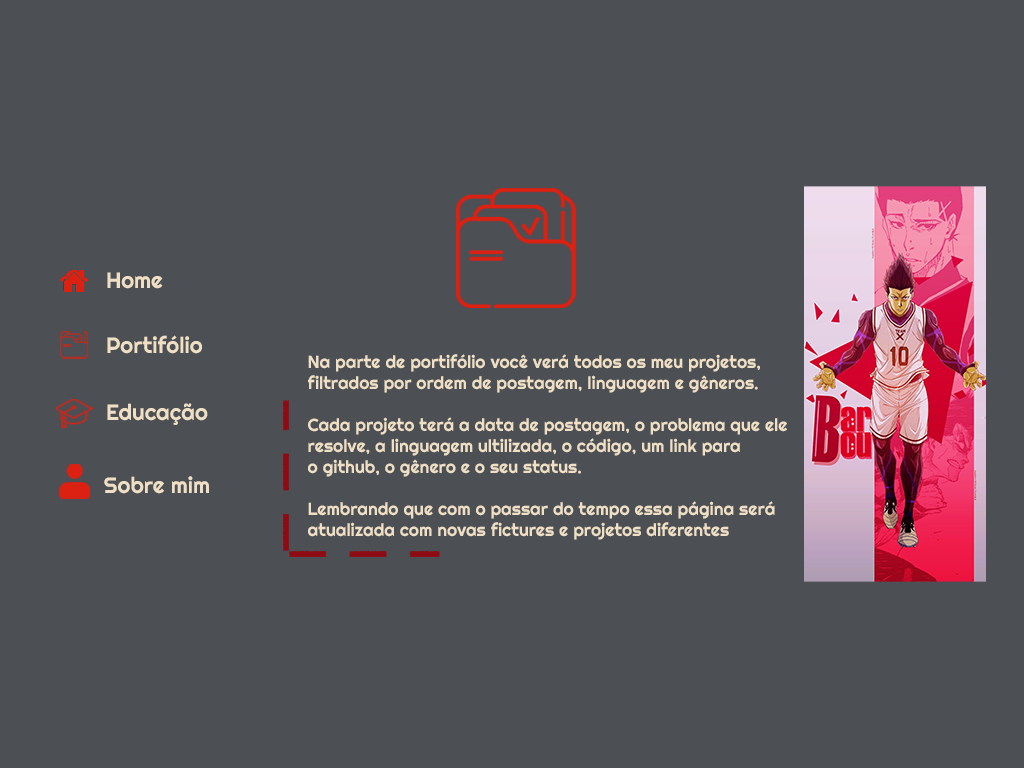
<style>
.page{position:relative;width:1024px;height:768px;background:#4c4f54}
.page>*{position:absolute;margin:0}
.t1{font:22.3px "Righteous-Regular";color:#efdfc5}
.t2{font:17.5px "Righteous-Regular";color:#efdfc5}
</style>
<div class="page">
<p class="t1" style="left:107px;top:272px;width:56px;height:17px">Home</p>
<p class="t1" style="left:107px;top:335px;width:95px;height:19px">Portifólio</p>
<p class="t2" style="left:308px;top:354px;width:479px;height:186px">Na parte de portifólio você verá todos os meu projetos,<br>filtrados por ordem de postagem, linguagem e gêneros.<br><br>Cada projeto terá a data de postagem, o problema que ele<br>resolve, a linguagem ultilizada, o código, um link para<br>o github, o gênero e o seu status.<br><br>Lembrando que com o passar do tempo essa página será<br>atualizada com novas fictures e projetos diferentes</p>
<p class="t1" style="left:107px;top:403px;width:101px;height:22px">Educação</p>
<p class="t1" style="left:104px;top:476px;width:105px;height:18px">Sobre mim</p>
</div>
